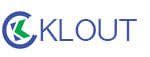
<style>
.page{position:relative;width:150px;height:57px;background:#ffffff}
.page>*{position:absolute;margin:0}
.t1{font:28.1px "AppleGothic";color:#3e54a5;scale:1.04 1}
</style>
<div class="page">
<p class="t1" style="left:40px;top:19px;width:97px;height:22px">KLOUT</p>
</div>
